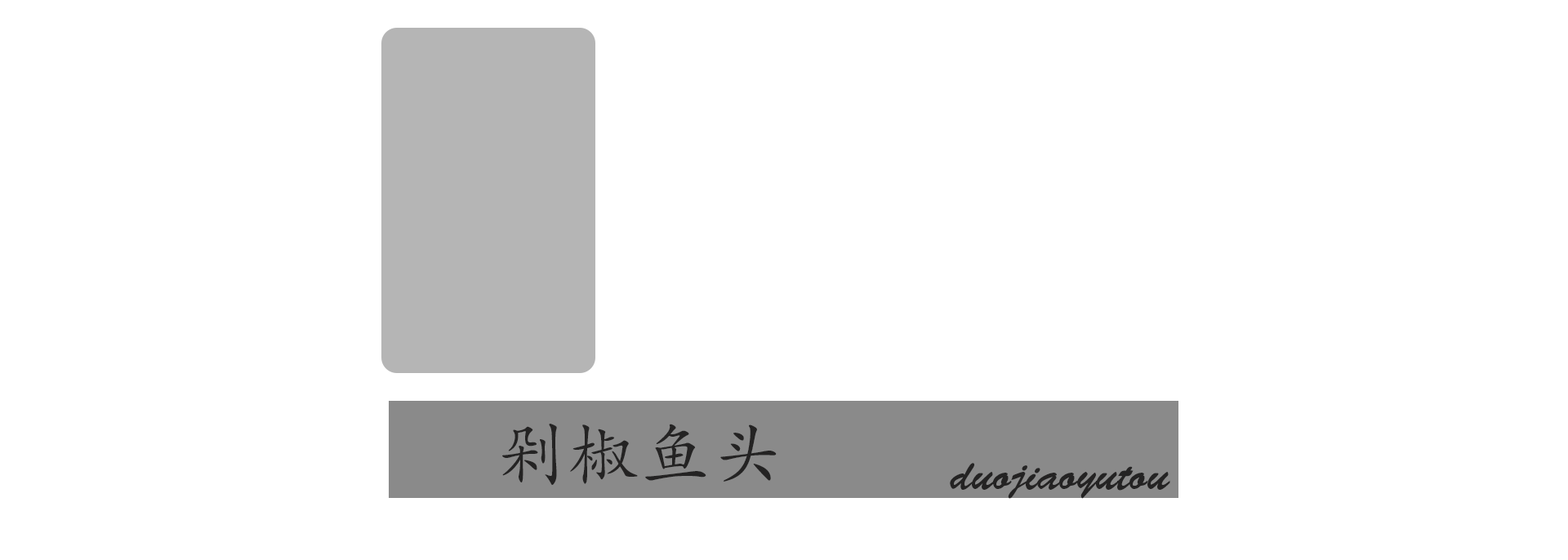
<style>
.page{position:relative;width:1568px;height:560px;background:#ffffff}
.page>*{position:absolute;margin:0}
.t1{font:71.7px "AdobeKaitiStd-Regular";color:#242323}
.t2{font:43.8px "BrushScriptStd";color:#242323}
</style>
<div class="page">
<p class="t1" style="left:502px;top:424px;width:275px;height:61px">剁椒鱼头</p>
<p class="t2" style="left:950px;top:463px;width:220px;height:36px">duojiaoyutou</p>
</div>
